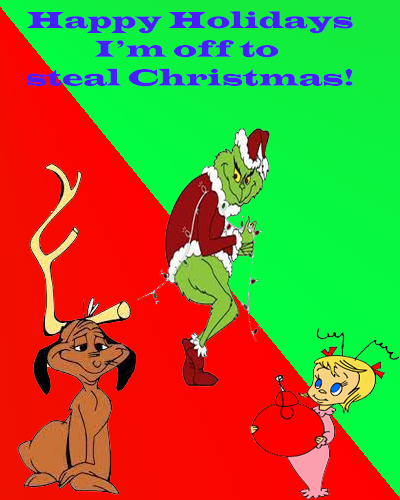
<style>
.page{position:relative;width:400px;height:500px}
.page>*{position:absolute;margin:0}
.t1{font:24px "LatinWide";color:#481eff}
</style>
<div class="page">
<p class="t1" style="left:26px;top:11px;width:327px;height:76px;text-align:center">Happy Holidays<br>I’m off to <br>steal Christmas!</p>
</div>
